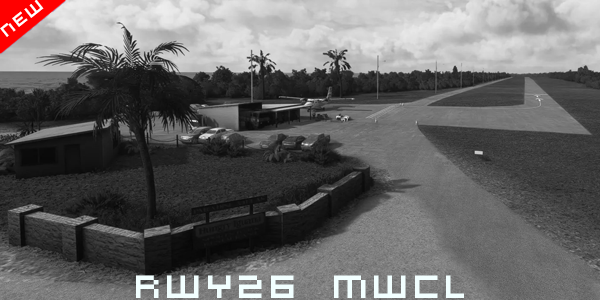
<style>
.page{position:relative;width:600px;height:300px}
.page>*{position:absolute;margin:0}
.t1{font:36px "VirtualDJ";color:#f2ffff}
</style>
<div class="page">
<p class="t1" style="left:136px;top:275px;width:328px;height:23px">RWY26 MwCL</p>
</div>
